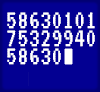
<style>
.page{position:relative;width:100px;height:92px;background:#030092}
.page>*{position:absolute;margin:0}
.t1{font:27px/18px "VT323-Regular";letter-spacing:0.005em;color:#ffffff}
</style>
<div class="page">
<p class="t1" style="left:7px;top:12px;width:88px;height:53px">58630101<br>75329940<br>58630</p>
</div>
